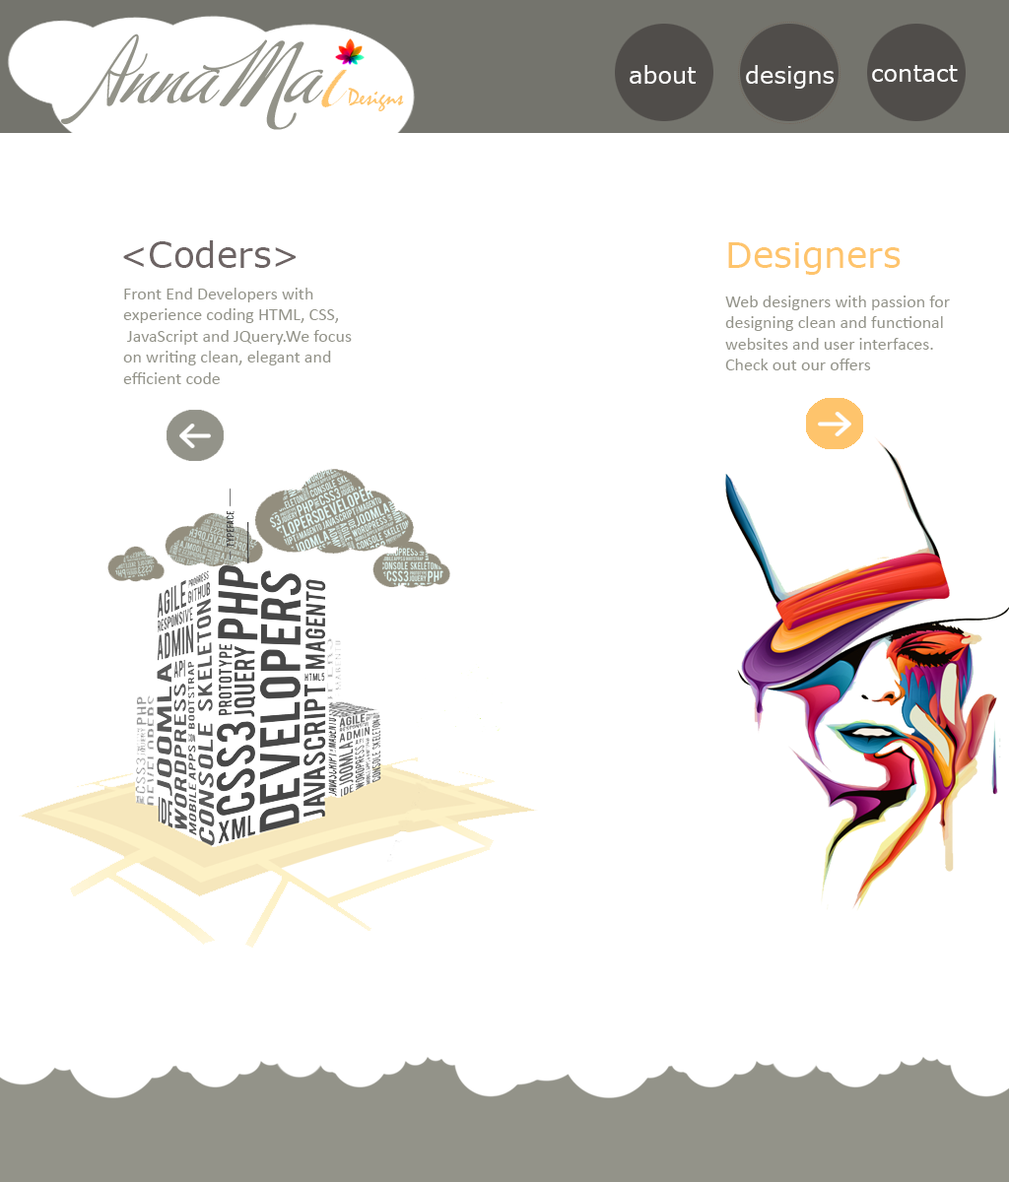
<style>
.page{position:relative;width:1009px;height:1182px;background:#ffffff}
.page>*{position:absolute;margin:0}
.t1{font:23.6px "Verdana";color:#ffffff}
.t2{font:35.5px "Verdana";color:#6d6464}
.t3{font:23.6px "Verdana";color:#74746d}
.t4{font:35.5px "Verdana";color:#fec46c}
.t5{font:17.7px "Calibri";color:#939389}
</style>
<div class="page">
<p class="t1" style="left:629px;top:65px;width:66px;height:19px">about</p>
<p class="t1" style="left:746px;top:65px;width:87px;height:24px">designs</p>
<p class="t1" style="left:872px;top:65px;width:86px;height:17px">contact</p>
<p class="t2" style="left:123px;top:240px;width:173px;height:28px"><span class="t3"><br></span>&lt;Coders&gt;</p>
<p class="t4" style="left:728px;top:242px;width:172px;height:33px"><span class="t3"><br></span>Designers</p>
<p class="t5" style="left:123px;top:288px;width:229px;height:96px">Front End Developers with <br>experience coding HTML, CSS,<br> JavaScript and JQuery.We focus <br>on writing clean, elegant and<br>efficient code</p>
<p class="t5" style="left:725px;top:296px;width:225px;height:74px">Web designers with passion for <br>designing clean and functional <br>websites and user interfaces.<br>Check out our offers</p>
</div>
